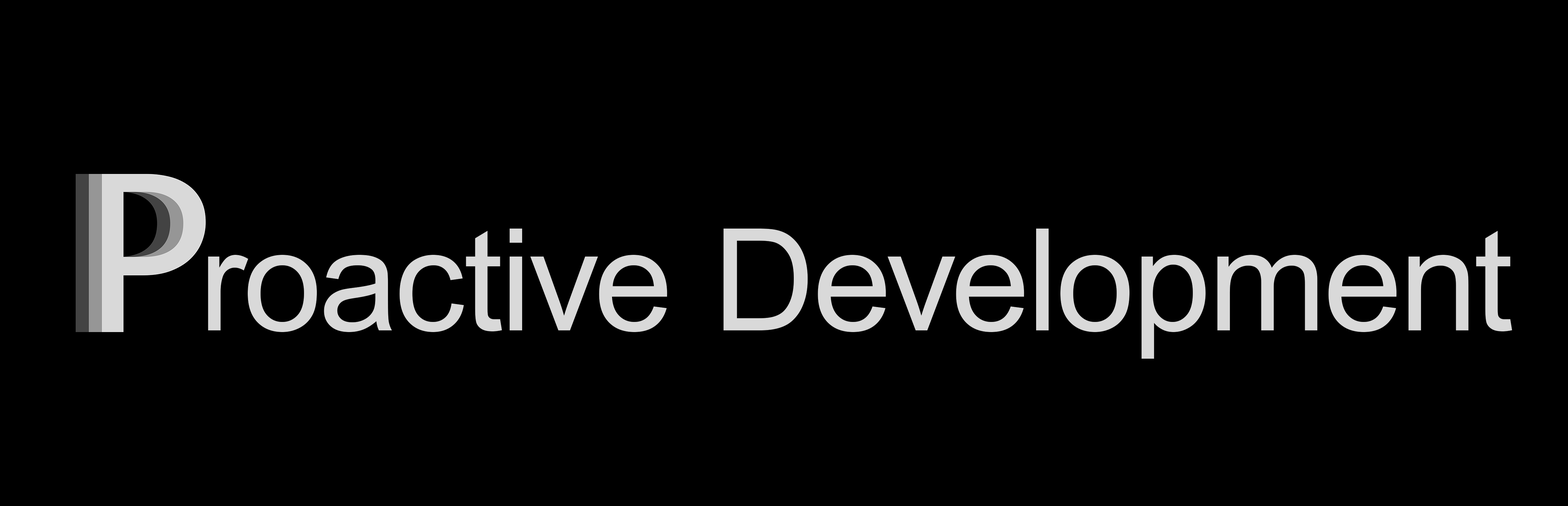
<style>
.page{position:relative;width:1568px;height:506px;background:#000000}
.page>*{position:absolute;margin:0}
.t1{font:142.3px "ArialMT";color:#d9d9d9}
</style>
<div class="page">
<p class="t1" style="left:208px;top:229px;width:1304px;height:130px">roactive Development</p>
</div>
